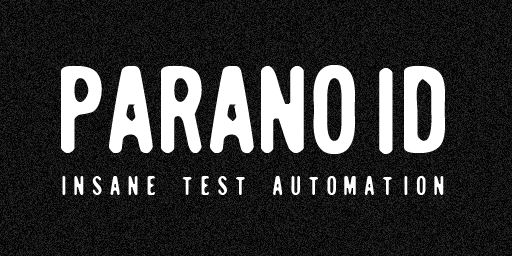
<style>
.page{position:relative;width:512px;height:256px}
.page>*{position:absolute;margin:0}
.t1{font:109.2px "SugarCube";color:#ffffff}
.t2{font:23px "SugarCube";letter-spacing:0.32em;color:#ffffff}
</style>
<div class="page">
<p class="t1" style="left:61px;top:65px;width:384px;height:89px">PARANOID</p>
<p class="t2" style="left:62px;top:176px;width:382px;height:19px">INSANE TEST AUTOMATION</p>
</div>
